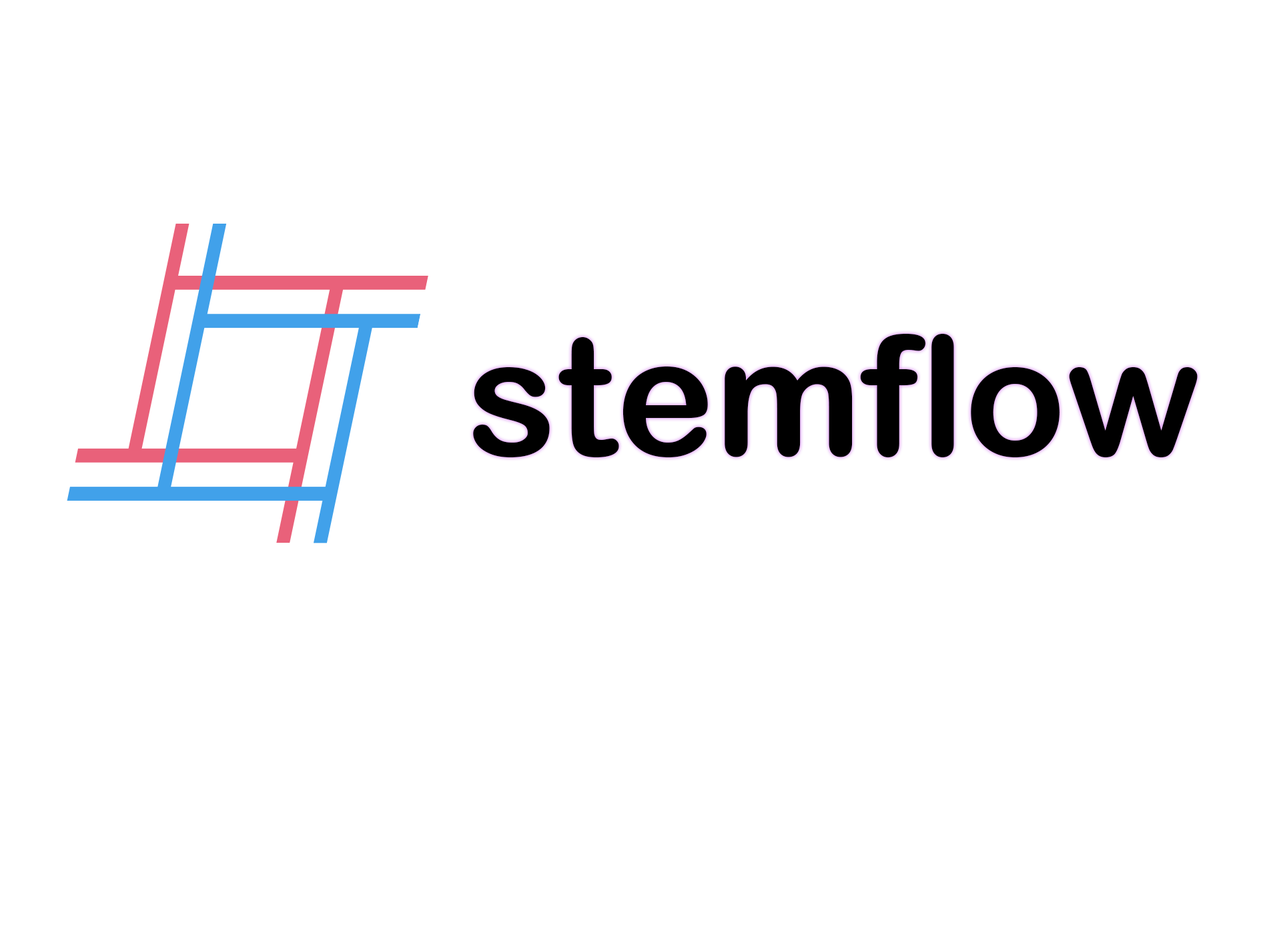
<style>
.page{position:relative;width:1261px;height:946px;background:#ffffff}
.page>*{position:absolute;margin:0}
.t1{font:166.8px "ArialRoundedMTBold";color:#000000}
</style>
<div class="page">
<p class="t1" style="left:473px;top:334px;width:725px;height:123px">stemflow</p>
</div>
